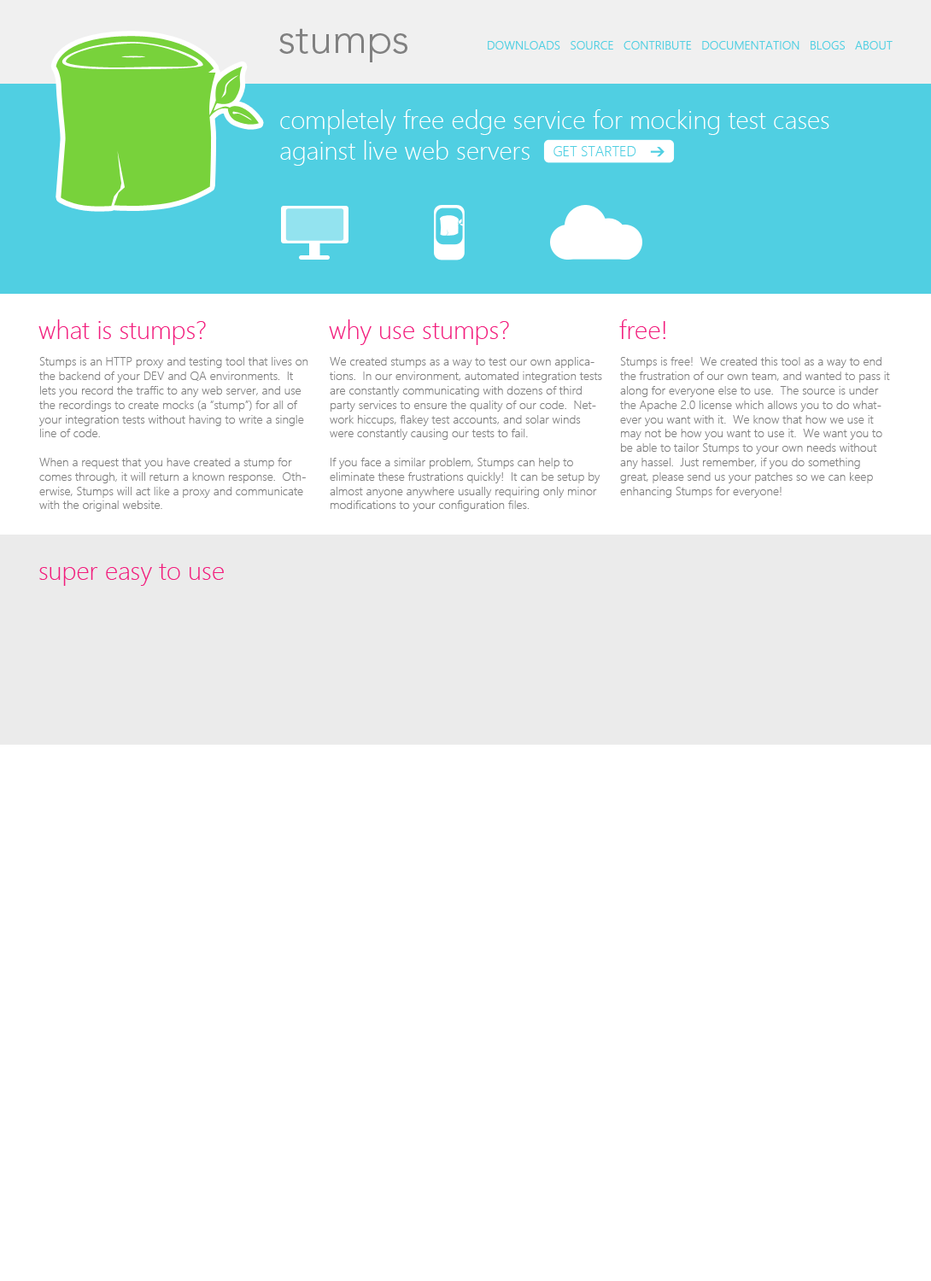
<style>
.page{position:relative;width:931px;height:1281px;background:#ffffff}
.page>*{position:absolute;margin:0}
.t1{font:41px "Avenir-Light";color:#808080}
.t2{font:12px "SegoeUI-Semilight";color:#50cfe2}
.t3{font:25.6px "SegoeUI-Light";color:#ffffff}
.t4{font:14.2px "SegoeUI-Light";color:#50cfe2}
.t5{font:25.6px "SegoeUI-Light";color:#f21c7c}
.t6{font:12px "SegoeUI-Light";color:#808080}
</style>
<div class="page">
<p class="t1" style="left:279px;top:28px;width:128px;height:34px">stumps</p>
<p class="t2" style="left:488px;top:41px;width:404px;height:9px">DOWNLOADS   SOURCE   CONTRIBUTE   DOCUMENTATION   BLOGS   ABOUT</p>
<p class="t3" style="left:280px;top:109px;width:549px;height:57px">completely free edge service for mocking test cases <br>against live web servers</p>
<p class="t4" style="left:553px;top:146px;width:83px;height:10px">GET STARTED</p>
<p class="t5" style="left:38px;top:319px;width:168px;height:26px">what is stumps?</p>
<p class="t5" style="left:329px;top:319px;width:180px;height:26px">why use stumps?</p>
<p class="t5" style="left:619px;top:319px;width:46px;height:20px">free!</p>
<p class="t6" style="left:39px;top:357px;width:269px;height:155px">Stumps is an HTTP proxy and testing tool that lives on the backend of your DEV and QA environments.  It lets you record the traffic to any web server, and use the recordings to create mocks (a “stump”) for all of your integration tests without having to write a single line of code.  <br><br>When a request that you have created a stump for comes through, it will return a known response.  Otherwise, Stumps will act like a proxy and communicate with the original website.</p>
<p class="t6" style="left:330px;top:357px;width:272px;height:155px">We created stumps as a way to test our own applications.  In our environment, automated integration tests are constantly communicating with dozens of third party services to ensure the quality of our code.  Network hiccups, flakey test accounts, and solar winds were constantly causing our tests to fail.  <br><br>If you face a similar problem, Stumps can help to eliminate these frustrations quickly!  It can be setup by almost anyone anywhere usually requiring only minor modifications to your configuration files.</p>
<p class="t6" style="left:620px;top:357px;width:270px;height:141px">Stumps is free!  We created this tool as a way to end the frustration of our own team, and wanted to pass it along for everyone else to use.  The source is under the Apache 2.0 license which allows you to do whatever you want with it.  We know that how we use it may not be how you want to use it.  We want you to be able to tailor Stumps to your own needs without any hassel.  Just remember, if you do something great, please send us your patches so we can keep enhancing Stumps for everyone!</p>
<p class="t5" style="left:39px;top:564px;width:185px;height:22px">super easy to use</p>
</div>
